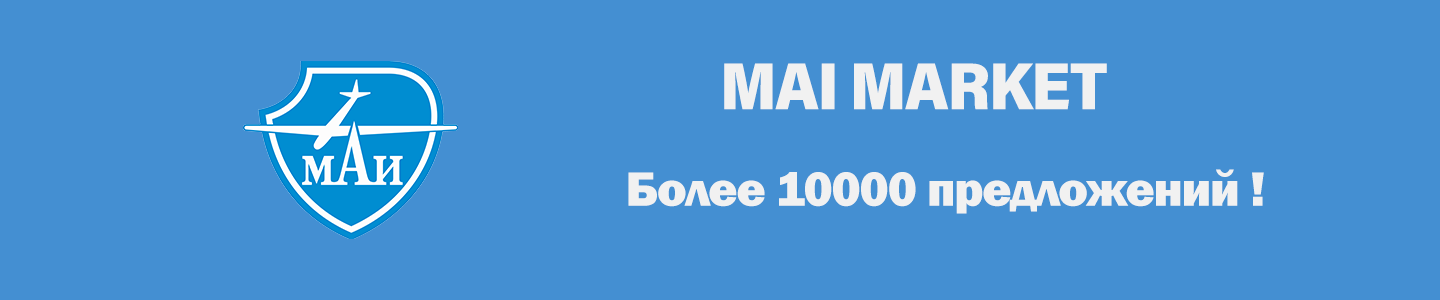
<style>
.page{position:relative;width:1440px;height:300px;background:#448fd2}
.page>*{position:absolute;margin:0}
.t1{font:66.7px "AcuminConcept-SemiCondensedBlack";letter-spacing:-0.025em;color:#f2f2f2}
.t2{font:50px "FranklinGothic-Heavy";letter-spacing:-0.025em;color:#f2f2f2}
</style>
<div class="page">
<p class="t1" style="left:724px;top:63px;width:383px;height:47px">MAI MARKET</p>
<p class="t2" style="left:628px;top:169px;width:636px;height:45px">Более 10000 предложений ! ежедневно</p>
</div>
